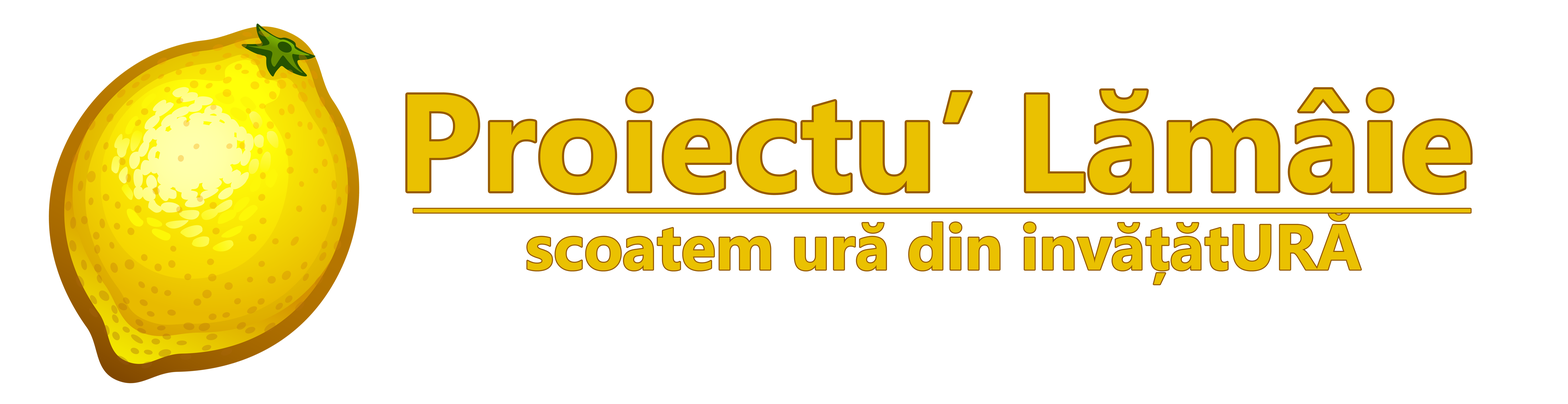
<style>
.page{position:relative;width:1568px;height:404px;background:#ffffff}
.page>*{position:absolute;margin:0}
.t1{font:137.9px "SegoeUI-Bold";color:#eac101}
.t2{font:63.7px "SegoeUI-Bold";color:#eac101}
</style>
<div class="page">
<p class="t1" style="left:407px;top:89px;width:1064px;height:104px">Proiectu’ Lămâie</p>
<p class="t2" style="left:414px;top:209px;width:1057px;height:3px">________________________________________</p>
<p class="t2" style="left:527px;top:211px;width:834px;height:73px">scoatem ură din invățătURĂ</p>
</div>
